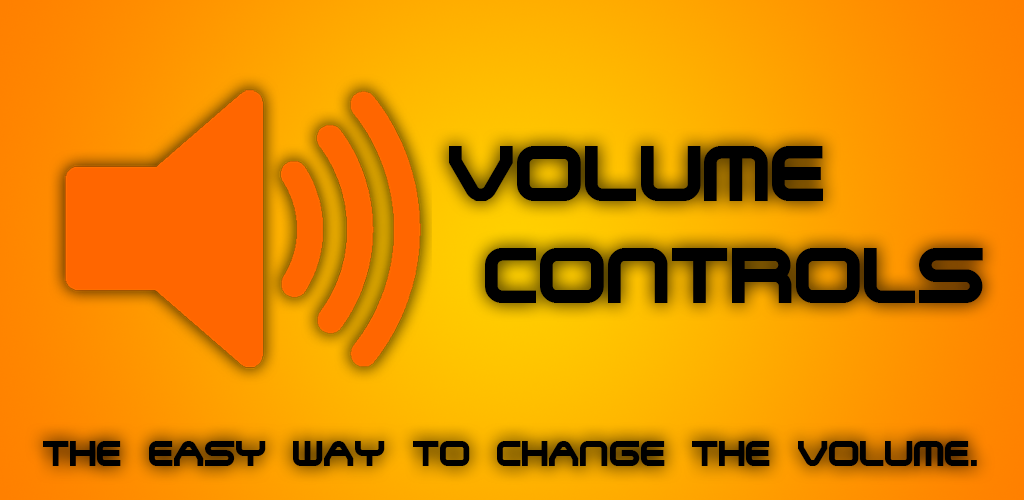
<style>
.page{position:relative;width:1024px;height:500px}
.page>*{position:absolute;margin:0}
.t1{font:85px "TerminatorTwo";color:#000000}
.t2{font:39px "TerminatorTwo";color:#000000}
</style>
<div class="page">
<p class="t1" style="left:449px;top:146px;width:534px;height:157px">Volume<br> Controls</p>
<p class="t2" style="left:43px;top:441px;width:934px;height:25px">The eAsy wAy to chAnge The Volume.</p>
</div>
